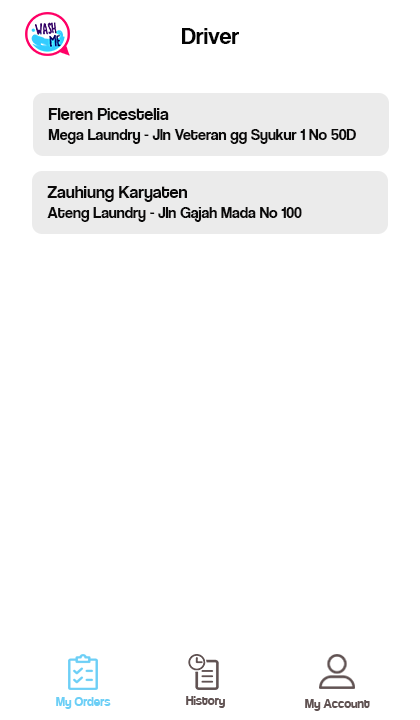
<style>
.page{position:relative;width:420px;height:720px;background:#ffffff}
.page>*{position:absolute;margin:0}
.t1{font:24px "CoolveticaRg-Regular";color:#040404}
.t2{font:16px "CoolveticaRg-Regular";color:#0b0a0a}
.t3{font:18px "CoolveticaRg-Regular";color:#0b0a0a}
.t4{font:14px "Coolvetica-Regular";color:#6dcff6}
.t5{font:14px "Coolvetica-Regular";color:#605252}
</style>
<div class="page">
<p class="t1" style="left:182px;top:28px;width:57px;height:16px">Driver</p>
<p class="t2" style="left:48px;top:108px;width:308px;height:36px"><span class="t3">Fleren Picestelia<br></span>Mega Laundry - Jln Veteran gg Syukur 1 No 50D</p>
<p class="t2" style="left:47px;top:186px;width:255px;height:36px"><span class="t3">Zauhiung Karyaten<br></span>Ateng Laundry - Jln Gajah Mada No 100</p>
<p class="t4" style="left:56px;top:697px;width:55px;height:12px">My Orders</p>
<p class="t5" style="left:186px;top:696px;width:39px;height:12px">History</p>
<p class="t5" style="left:305px;top:699px;width:65px;height:12px">My Account</p>
</div>
